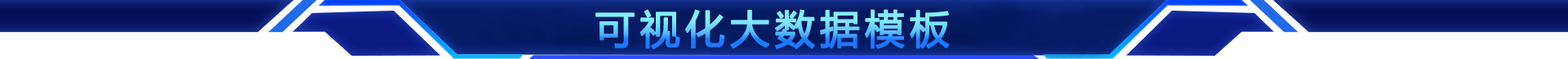
<style>
.page{position:relative;width:1568px;height:59px;background:#ffffff}
.page>*{position:absolute;margin:0}
.t1{font:39.2px "MicrosoftYaHei";letter-spacing:0.12em;font-weight:bold}
</style>
<div class="page">
<p class="t1" style="left:595px;top:9px;width:355px;height:41px">可视化大数据模板</p>
</div>
